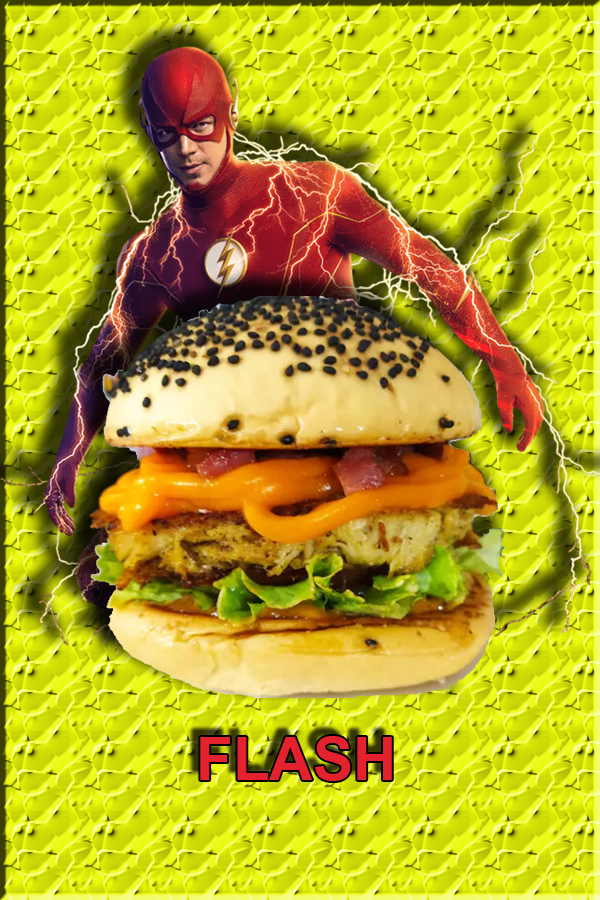
<style>
.page{position:relative;width:600px;height:900px}
.page>*{position:absolute;margin:0}
.t1{font:60px "Arial-BoldMT";color:#e3222d}
</style>
<div class="page">
<p class="t1" style="left:200px;top:736px;width:192px;height:45px">FLASH</p>
</div>
